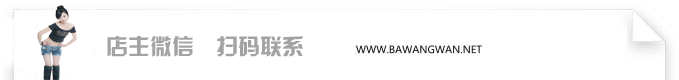
<style>
.page{position:relative;width:679px;height:80px;background:#ffffff}
.page>*{position:absolute;margin:0}
.t1{font:22px "HYk2gj";color:#a3a3a3;text-transform:uppercase}
</style>
<div class="page">
<p class="t1" style="left:107px;top:35px;width:196px;height:22px">店主微信  扫码联系</p>
</div>
